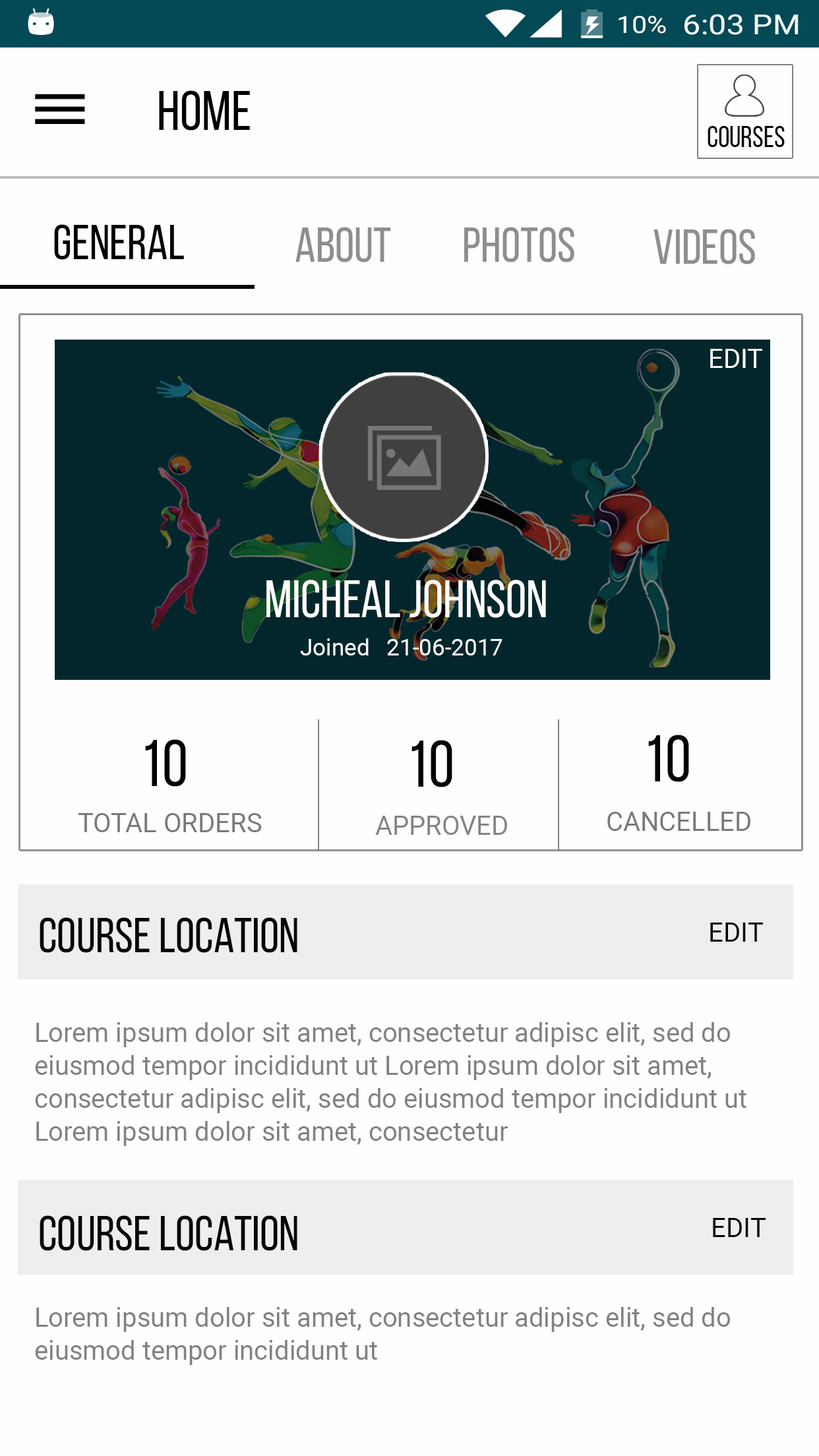
<style>
.page{position:relative;width:819px;height:1456px;background:#fefefe}
.page>*{position:absolute;margin:0}
.t1{font:56px "BebasNeueRegular";color:#010101}
.t2{font:29.8px "BebasNeueRegular";color:#050505}
.t3{font:49.5px "BebasNeueRegular";color:#000000}
.t4{font:49.5px "BebasNeueRegular";color:#8f8d8d}
.t5{font:26.4px "Roboto-Regular";color:#fefcfc}
.t6{font:52.8px "BebasNeueRegular";color:#fffdfd}
.t7{font:23.1px "Roboto-Regular";color:#fcfcfc}
.t8{font:65.9px "BebasNeueRegular";color:#020202}
.t9{font:65.9px "BebasNeueRegular";color:#000000}
.t10{font:26.4px "Roboto-Regular";color:#797979}
.t11{font:26.4px "Roboto-Regular";color:#848484}
.t12{font:49.5px "BebasNeueRegular";color:#050505}
.t13{font:26.4px "Roboto-Regular";color:#050505}
.t14{font:26.4px/33px "Roboto-Regular";color:#828181}
</style>
<div class="page">
<p class="t1" style="left:159px;top:90px;width:91px;height:41px">HOME</p>
<p class="t2" style="left:708px;top:126px;width:77px;height:21px">COURSES</p>
<p class="t3" style="left:54px;top:224px;width:130px;height:36px">GENERAL</p>
<p class="t4" style="left:295px;top:227px;width:96px;height:35px">ABOUT</p>
<p class="t4" style="left:464px;top:227px;width:110px;height:35px">PHOTOS</p>
<p class="t4" style="left:653px;top:229px;width:102px;height:35px">VIDEOS</p>
<p class="t5" style="left:710px;top:349px;width:52px;height:19px">EDIT</p>
<p class="t6" style="left:266px;top:580px;width:280px;height:38px">MIcheal Johnson</p>
<p class="t7" style="left:300px;top:638px;width:202px;height:17px">Joined   21-06-2017</p>
<p class="t8" style="left:648px;top:735px;width:41px;height:47px">10</p>
<p class="t9" style="left:145px;top:739px;width:41px;height:48px">10</p>
<p class="t8" style="left:411px;top:740px;width:41px;height:47px">10</p>
<p class="t10" style="left:78px;top:813px;width:184px;height:19px">TOTAL ORDERS</p>
<p class="t11" style="left:375px;top:816px;width:132px;height:19px">APPROVED</p>
<p class="t10" style="left:607px;top:812px;width:143px;height:19px">CANCELLED</p>
<p class="t12" style="left:40px;top:917px;width:257px;height:36px">COURSE LOCATION</p>
<p class="t13" style="left:710px;top:923px;width:53px;height:19px">EDIT</p>
<p class="t14" style="left:35px;top:1022px;width:711px;height:124px">Lorem ipsum dolor sit amet, consectetur adipisc elit, sed do <br>eiusmod tempor incididunt ut Lorem ipsum dolor sit amet, <br>consectetur adipisc elit, sed do eiusmod tempor incididunt ut<br>Lorem ipsum dolor sit amet, consectetur</p>
<p class="t12" style="left:40px;top:1215px;width:257px;height:36px">COURSE LOCATION</p>
<p class="t13" style="left:713px;top:1218px;width:53px;height:19px">EDIT</p>
<p class="t14" style="left:35px;top:1307px;width:695px;height:58px">Lorem ipsum dolor sit amet, consectetur adipisc elit, sed do <br>eiusmod tempor incididunt ut</p>
</div>
